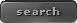
<style>
.page{position:relative;width:77px;height:23px}
.page>*{position:absolute;margin:0}
.t1{font:10px "Verdana-Bold";color:#aeaeae;scale:1.1 1}
</style>
<div class="page">
<p class="t1" style="left:17px;top:7px;width:42px;height:8px">search</p>
<p class="t1" style="left:17px;top:7px;width:42px;height:8px">search</p>
</div>
